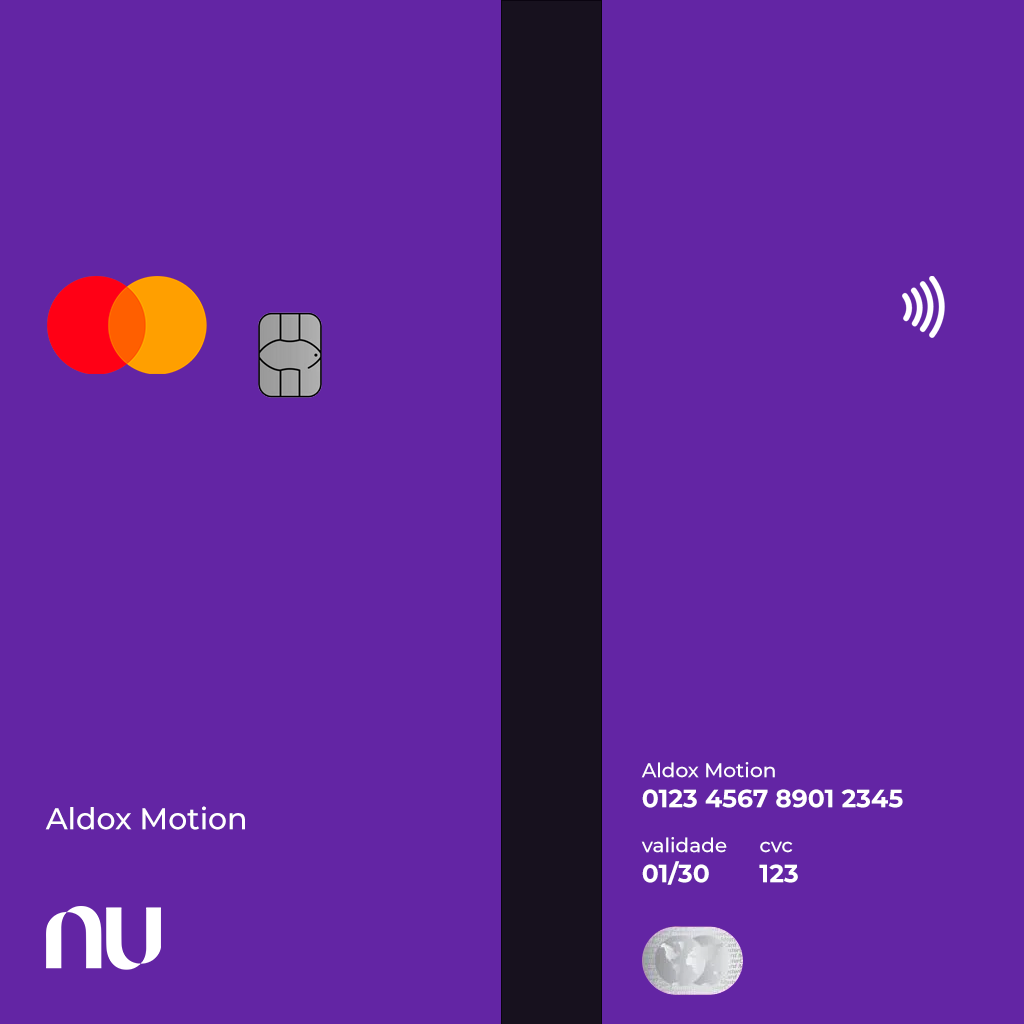
<style>
.page{position:relative;width:1024px;height:1024px;background:#6325a4}
.page>*{position:absolute;margin:0}
.t1{font:25px "Montserrat-Bold";color:#ffffff}
.t2{font:20px "Montserrat-Medium";color:#ffffff}
.t3{font:30px "Montserrat-Medium";color:#ffffff}
</style>
<div class="page">
<p class="t1" style="left:641px;top:762px;width:262px;height:46px"><span class="t2">Aldox Motion <br></span>0123 4567 8901 2345</p>
<p class="t3" style="left:45px;top:806px;width:200px;height:24px">Aldox Motion</p>
<p class="t2" style="left:641px;top:837px;width:157px;height:48px">validade      cvc<br><span class="t1">01/30       123</span></p>
</div>
